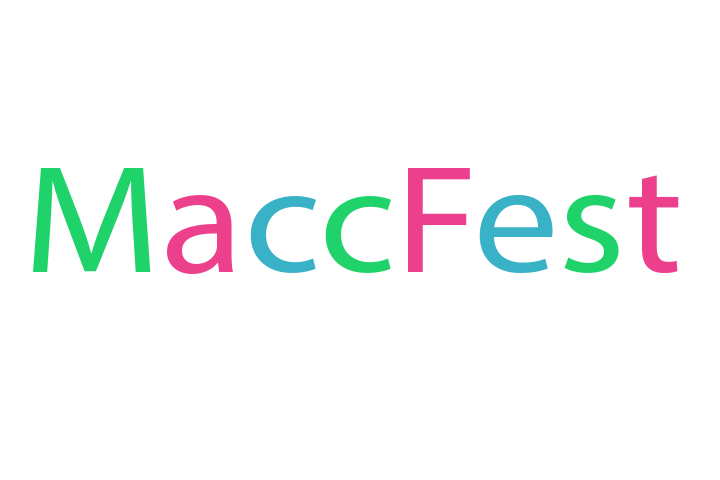
<style>
.page{position:relative;width:720px;height:480px;background:#ffffff}
.page>*{position:absolute;margin:0}
.t1{font:155px "MyriadPro-Regular";color:#1fd26a;scale:1.1 1}
.t2{font:155px "MyriadPro-Regular";color:#ec3f8c;scale:1.1 1}
.t3{font:155px "MyriadPro-Regular";color:#39b1c6;scale:1.1 1}
</style>
<div class="page">
<p class="t1" style="left:33px;top:168px;width:646px;height:106px">M<span class="t2">a</span><span class="t3">c</span>c<span class="t2">F</span><span class="t3">e</span>s<span class="t2">t</span></p>
</div>
